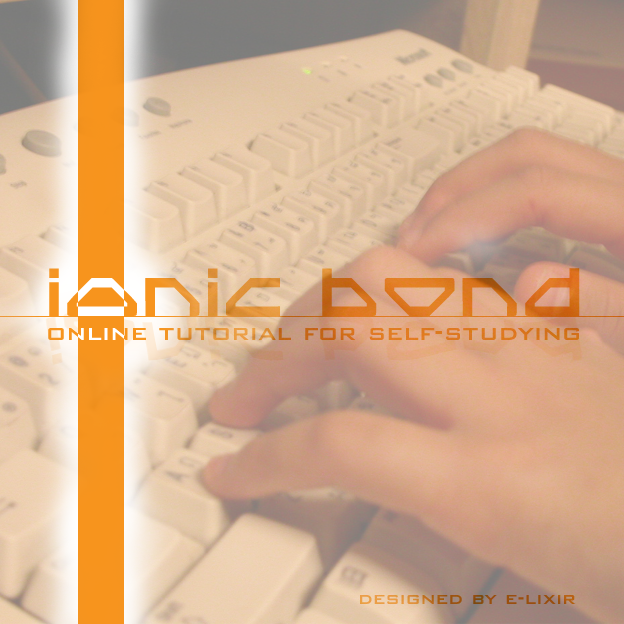
<style>
.page{position:relative;width:624px;height:624px}
.page>*{position:absolute;margin:0}
.t1{font:63.5px "SpyLord";text-transform:uppercase}
.t2{font:63.5px "SpyLord"}
.t3{font:28.2px "BankGothicBT-Medium"}
.t4{font:21.2px "BankGothicBT-Medium"}
</style>
<div class="page">
<p class="t1" style="left:49px;top:268px;width:531px;height:48px">ionic b<span class="t2">o</span>n<span class="t2">d</span></p>
<p class="t1" style="left:49px;top:268px;width:531px;height:48px">ionic b<span class="t2">o</span>n<span class="t2">d</span></p>
<p class="t3" style="left:48px;top:328px;width:531px;height:12px">online tutorial for self-studying</p>
<p class="t3" style="left:48px;top:328px;width:531px;height:12px">online tutorial for self-studying</p>
<p class="t4" style="left:360px;top:595px;width:216px;height:9px">designed by e-lixir</p>
</div>
